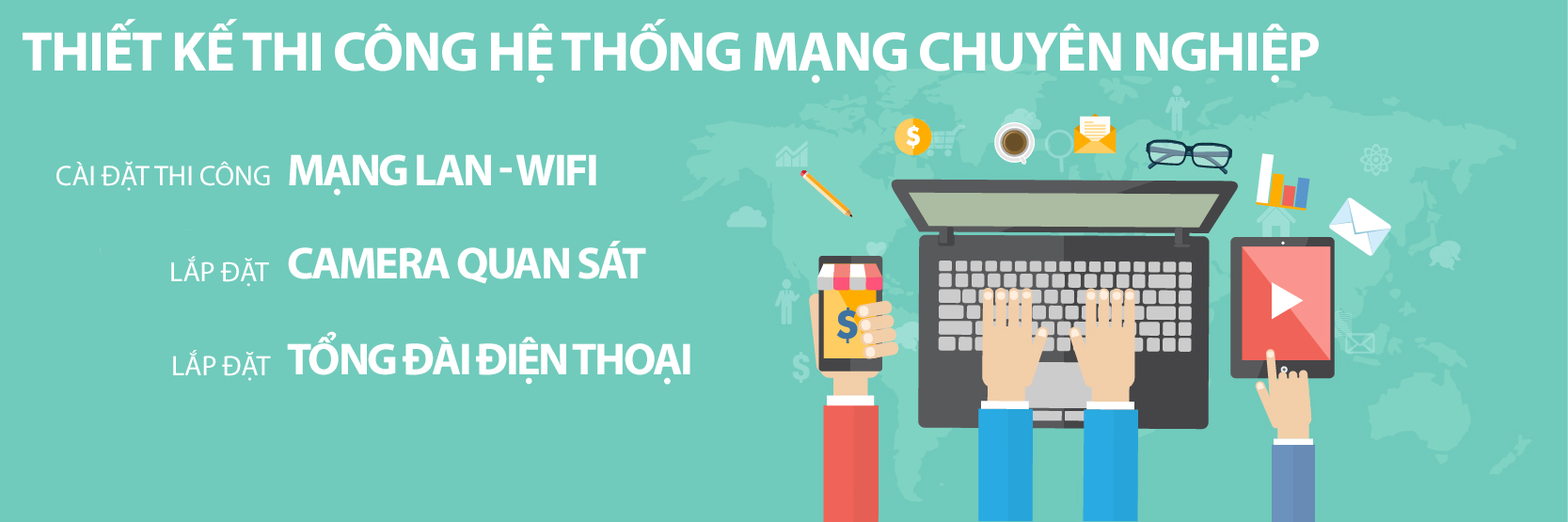
<style>
.page{position:relative;width:1568px;height:522px;background:#70cbbc}
.page>*{position:absolute;margin:0}
.t1{font:56.3px "MyriadPro-Bold";letter-spacing:-0.025em;color:#ffffff;text-transform:uppercase}
.t2{font:28.6px "MyriadPro-Regular";color:#ffffff;text-transform:uppercase}
.t3{font:45.1px "MyriadPro-Bold";letter-spacing:-0.05em;color:#ffffff;text-transform:uppercase}
.t4{font:45px "MyriadPro-Bold";letter-spacing:-0.05em;color:#ffffff;text-transform:uppercase}
.t5{font:27.9px "MyriadPro-Regular";color:#ffffff;text-transform:uppercase}
.t6{font:44.9px "MyriadPro-Bold";letter-spacing:-0.05em;color:#ffffff;text-transform:uppercase}
.t7{font:28.2px "MyriadPro-Regular";color:#ffffff;text-transform:uppercase}
</style>
<div class="page">
<p class="t1" style="left:23px;top:19px;width:1296px;height:65px">THIẾT KẾ THI CÔNG HỆ THỐNG MẠNG CHUYÊN NGHIỆP</p>
<p class="t2" style="left:56px;top:161px;width:214px;height:30px">Cài Đặt Thi Công</p>
<p class="t3" style="left:289px;top:154px;width:307px;height:42px">MẠNG LAN - WIFI</p>
<p class="t4" style="left:288px;top:241px;width:358px;height:43px">CAMERA QUAN SÁT</p>
<p class="t5" style="left:171px;top:256px;width:98px;height:31px">Lắp Đặt</p>
<p class="t6" style="left:287px;top:331px;width:403px;height:54px">TỔNG ĐÀI ĐIỆN THOẠI</p>
<p class="t7" style="left:173px;top:350px;width:98px;height:31px">Lắp Đặt</p>
</div>
